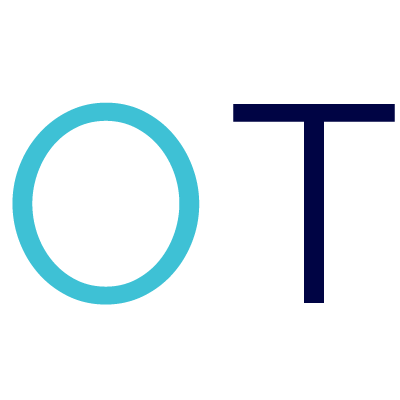
<style>
.page{position:relative;width:400px;height:400px;background:#ffffff}
.page>*{position:absolute;margin:0}
.t1{font:279.7px "Raleway";letter-spacing:0.06em;color:#3ec1d5}
.t2{font:279.7px "Raleway";letter-spacing:0.06em;color:#000444}
</style>
<div class="page">
<p class="t1" style="left:12px;top:102px;width:383px;height:203px">O<span class="t2">T</span></p>
</div>
